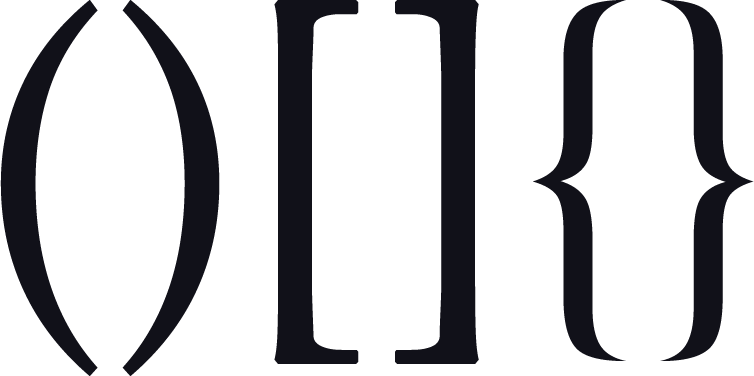
<style>
.page{position:relative;width:754px;height:376px;background:#ffffff}
.page>*{position:absolute;margin:0}
.t1{font:400px "Palatino-Roman";color:#111119}
</style>
<div class="page">
<p class="t1" style="left:0px;top:0px;width:754px;height:376px">()[]{}</p>
</div>
